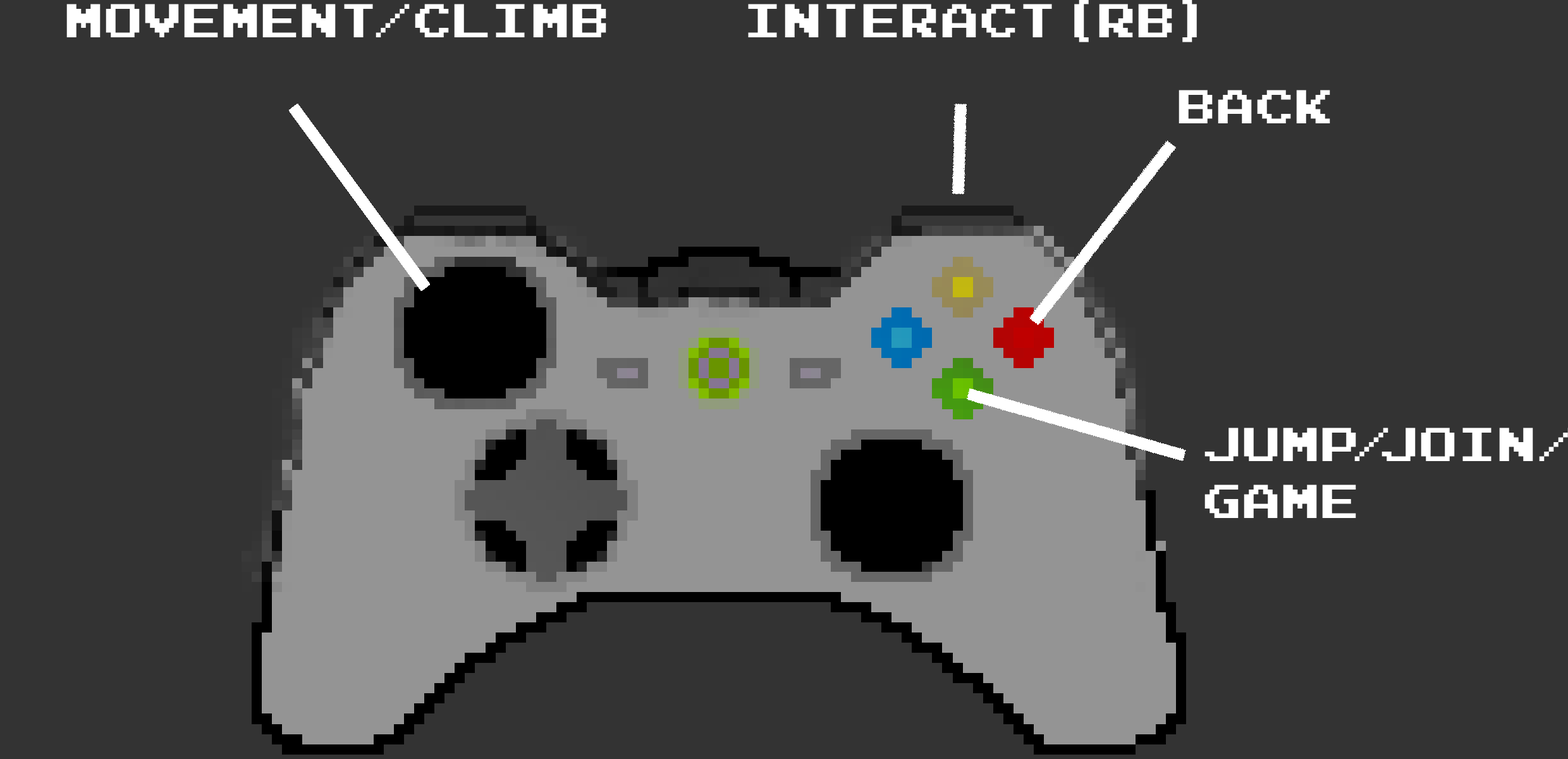
<style>
.page{position:relative;width:1568px;height:759px;background:#333333}
.page>*{position:absolute;margin:0}
.t1{font:47.4px "JoystixMonospace-Regular";color:#ffffff}
</style>
<div class="page">
<p class="t1" style="left:66px;top:4px;width:540px;height:33px">Movement/climb</p>
<p class="t1" style="left:748px;top:0px;width:449px;height:42px">interact(rb)</p>
<p class="t1" style="left:1179px;top:90px;width:151px;height:33px">back</p>
</div>
